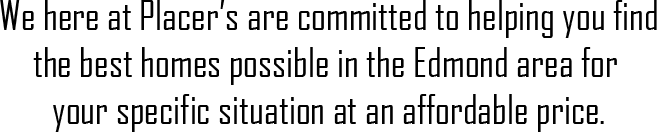
<style>
.page{position:relative;width:657px;height:132px;background:#ffffff}
.page>*{position:absolute;margin:0}
.t1{font:39px "AgencyFB-Reg";color:#000000}
</style>
<div class="page">
<p class="t1" style="left:0px;top:0px;width:657px;height:132px;text-align:center">We here at Placer’s are committed to helping you find<br>the best homes possible in the Edmond area for <br>your specific situation at an affordable price.</p>
</div>
